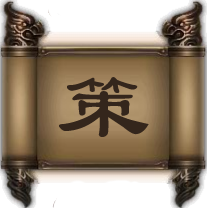
<style>
.page{position:relative;width:207px;height:208px}
.page>*{position:absolute;margin:0}
.t1{font:96px "LiSu";color:#34261c}
</style>
<div class="page">
<p class="t1" style="left:59px;top:77px;width:90px;height:60px">策</p>
</div>
